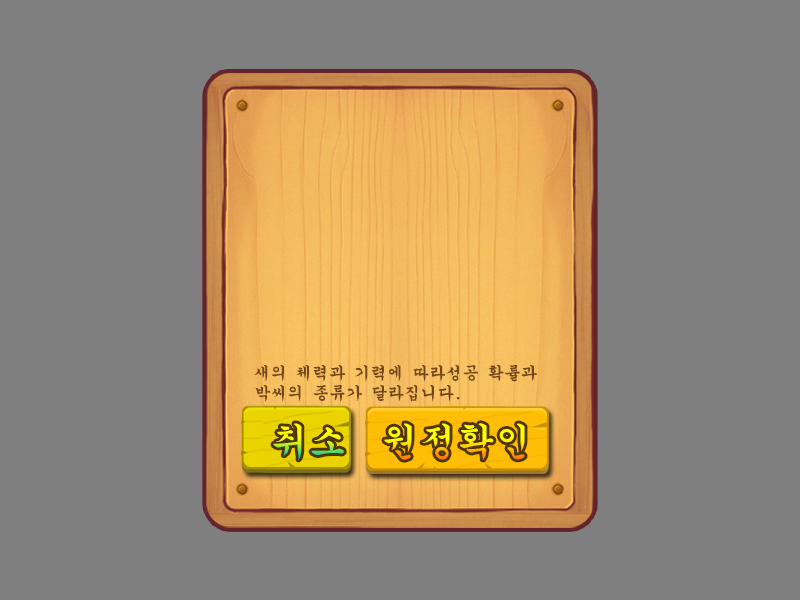
<style>
.page{position:relative;width:800px;height:600px;background:#7f7f7f}
.page>*{position:absolute;margin:0}
.t1{font:16.7px "GungsuhChe";color:#744619}
.t2{font:37.5px "GungsuhChe"}
</style>
<div class="page">
<p class="t1" style="left:254px;top:364px;width:283px;height:38px">새의 체력과 기력에 따라성공 확률과 <br>박씨의 종류가 달라집니다.</p>
<p class="t2" style="left:273px;top:423px;width:71px;height:37px">취소</p>
<p class="t2" style="left:384px;top:423px;width:141px;height:37px">원정확인</p>
</div>
